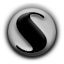
<style>
.page{position:relative;width:64px;height:64px;background:#ffffff}
.page>*{position:absolute;margin:0}
.t1{font:58.3px "Broadway";color:#000000}
</style>
<div class="page">
<p class="t1" style="left:16px;top:12px;width:31px;height:41px">S</p>
</div>
